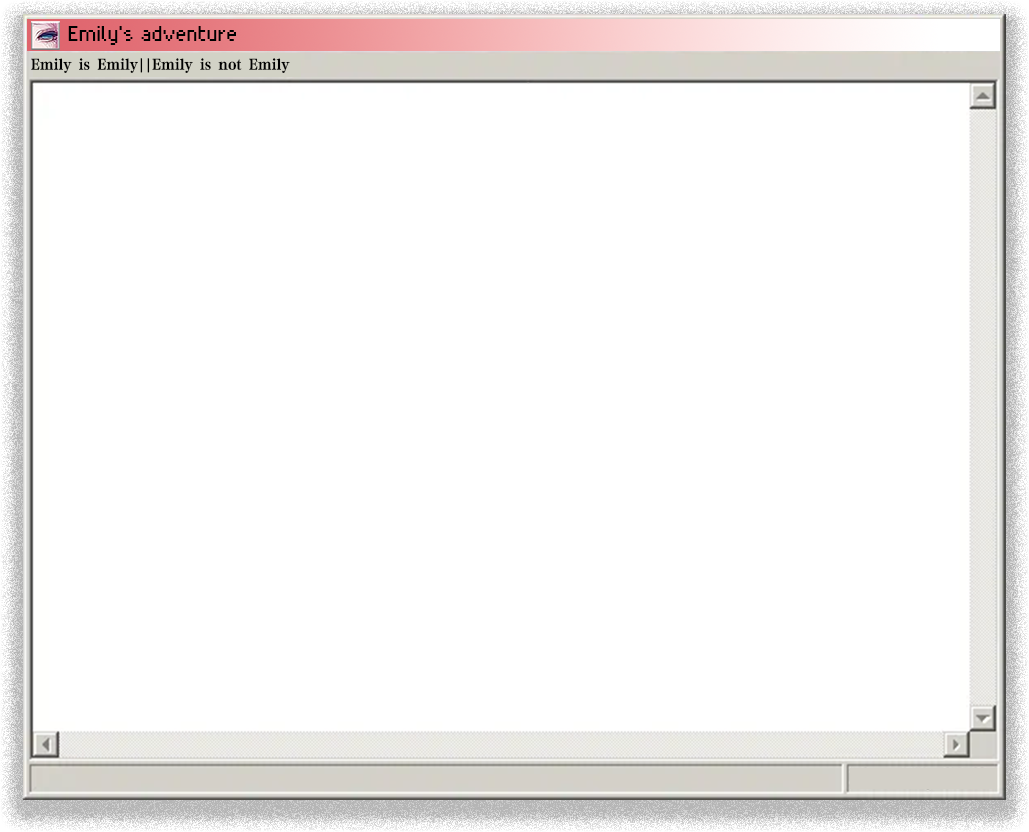
<style>
.page{position:relative;width:1029px;height:832px;background:#ffffff}
.page>*{position:absolute;margin:0}
.t1{font:22px "NFPixels-Regular";color:#000000}
.t2{font:14px "FZFYSJW--GB1-0";color:#000000}
</style>
<div class="page">
<p class="t1" style="left:68px;top:26px;width:168px;height:19px">Emily's adventure</p>
<p class="t2" style="left:31px;top:58px;width:107px;height:15px">Emily is Emily</p>
<p class="t2" style="left:140px;top:58px;width:150px;height:15px">||Emily is not Emily</p>
</div>
